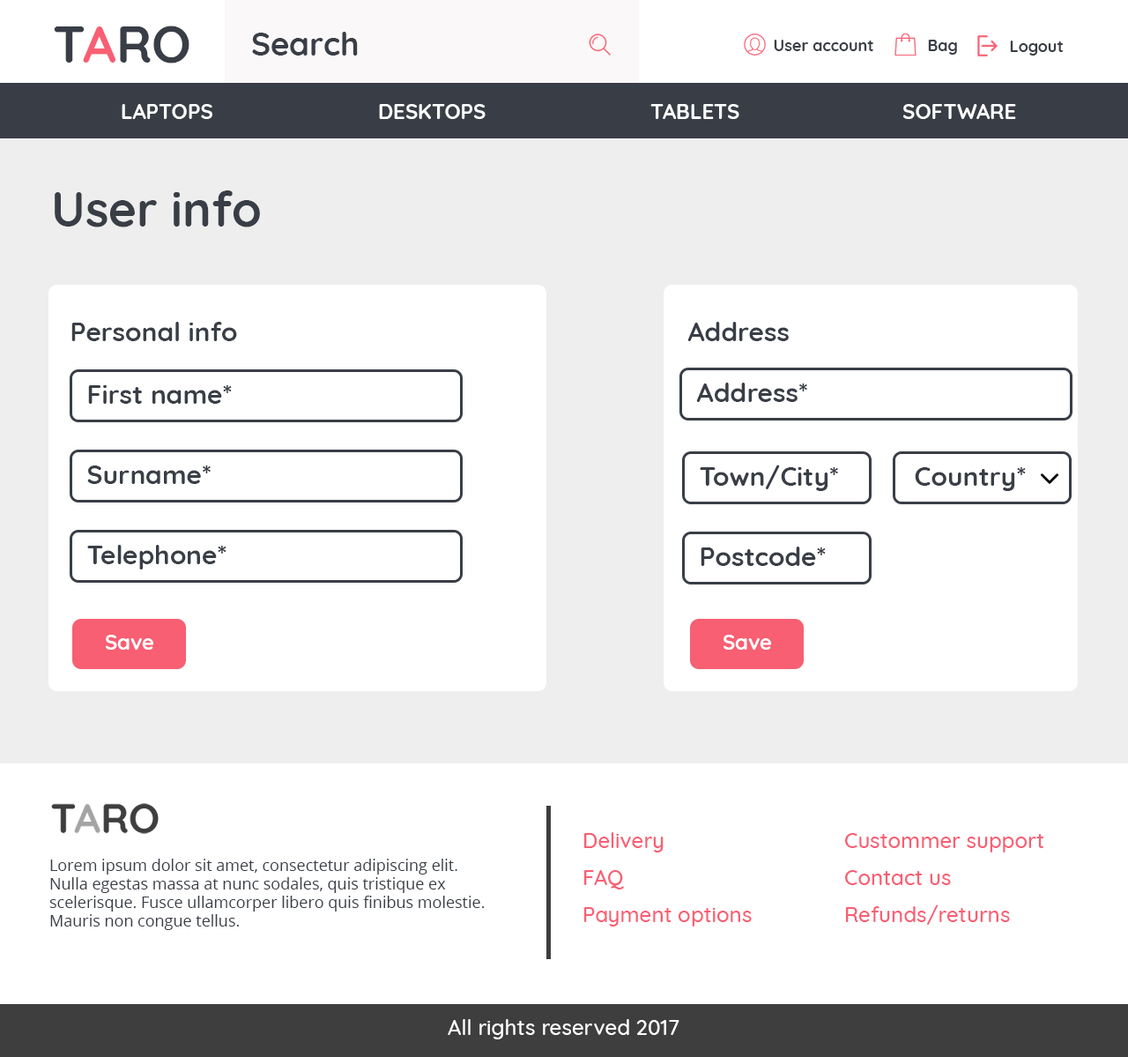
<style>
.page{position:relative;width:1128px;height:1057px;background:#ffffff}
.page>*{position:absolute;margin:0}
.t1{font:52px "Quicksand-Bold";color:#393e46}
.t2{font:52px "Quicksand-Bold";color:#f85f73}
.t3{font:32.6px "Quicksand-Bold";color:#393e46}
.t4{font:15.9px "Quicksand-Bold";color:#393e46}
.t5{font:21.2px "Quicksand-Bold";color:#ffffff}
.t6{font:48.5px "Quicksand-Bold";color:#393e46}
.t7{font:26.4px "Quicksand-Bold";color:#393e46}
.t8{font:21.2px/18.5px "Quicksand-Medium";color:#f85f73}
.t9{font:15.9px/18.5px "OpenSans";color:#393e46}
.t10{font:21.2px "Quicksand-Medium";color:#ffffff}
</style>
<div class="page">
<p class="t1" style="left:54px;top:26px;width:136px;height:37px">T<span class="t2">A</span>RO</p>
<p class="t3" style="left:252px;top:32px;width:106px;height:24px">Search</p>
<p class="t4" style="left:774px;top:40px;width:100px;height:11px">User account</p>
<p class="t4" style="left:928px;top:40px;width:29px;height:15px">Bag</p>
<p class="t4" style="left:1010px;top:41px;width:53px;height:15px">Logout</p>
<p class="t5" style="left:122px;top:104px;width:90px;height:15px">LAPTOPS</p>
<p class="t5" style="left:379px;top:104px;width:107px;height:15px">DESKTOPS</p>
<p class="t5" style="left:651px;top:104px;width:89px;height:15px">TABLETS</p>
<p class="t5" style="left:903px;top:104px;width:113px;height:15px">SOFTWARE</p>
<p class="t6" style="left:55px;top:190px;width:205px;height:37px">User info</p>
<p class="t7" style="left:71px;top:322px;width:166px;height:19px">Personal info</p>
<p class="t7" style="left:688px;top:322px;width:101px;height:19px">Address</p>
<p class="t7" style="left:88px;top:385px;width:144px;height:19px">First name*</p>
<p class="t7" style="left:696px;top:383px;width:111px;height:19px">Address*</p>
<p class="t7" style="left:87px;top:465px;width:124px;height:19px">Surname*</p>
<p class="t7" style="left:700px;top:465px;width:138px;height:26px">Town/City*</p>
<p class="t7" style="left:915px;top:467px;width:111px;height:24px">Country*</p>
<p class="t7" style="left:87px;top:545px;width:140px;height:24px">Telephone*</p>
<p class="t7" style="left:701px;top:547px;width:125px;height:19px">Postcode*</p>
<p class="t5" style="left:106px;top:635px;width:48px;height:15px">Save</p>
<p class="t5" style="left:724px;top:635px;width:48px;height:15px">Save</p>
<p class="t8" style="left:584px;top:832px;width:168px;height:94px">Delivery<br><br>FAQ<br><br>Payment options</p>
<p class="t8" style="left:845px;top:833px;width:200px;height:92px">Custommer support<br><br>Contact us<br><br>Refunds/returns</p>
<p class="t9" style="left:49px;top:859px;width:436px;height:71px">Lorem ipsum dolor sit amet, consectetur adipiscing elit. Nulla egestas massa at nunc sodales, quis tristique ex scelerisque. Fusce ullamcorper libero quis finibus molestie. Mauris non congue tellus.</p>
<p class="t10" style="left:448px;top:1019px;width:232px;height:20px">All rights reserved 2017</p>
</div>
